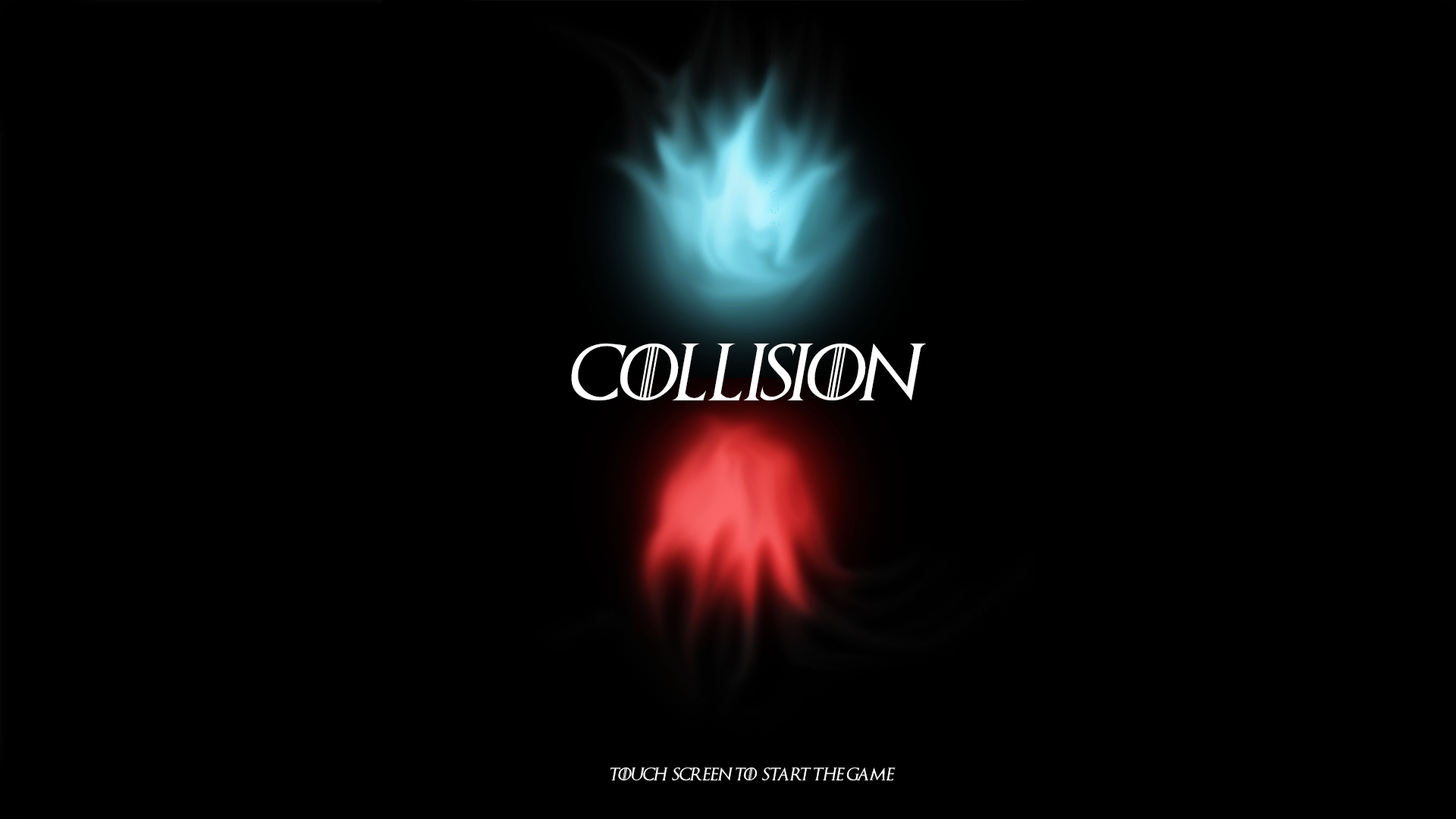
<style>
.page{position:relative;width:1456px;height:819px;background:#000000}
.page>*{position:absolute;margin:0}
.t1{font:56.9px "GameofThrones";color:#ffffff;font-style:italic}
.t2{font:12.6px "GameofThrones";color:#ffffff;font-style:italic}
</style>
<div class="page">
<p class="t1" style="left:571px;top:344px;width:355px;height:56px">COLLISION</p>
<p class="t2" style="left:610px;top:767px;width:286px;height:14px">Touch  Screen to  start the game</p>
</div>
